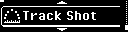
<style>
.page{position:relative;width:128px;height:32px;background:#000000}
.page>*{position:absolute;margin:0}
.t1{font:16px "PixelOperator-Bold";color:#ffffff}
</style>
<div class="page">
<p class="t1" style="left:23px;top:11px;width:73px;height:9px">Track Shot</p>
</div>
